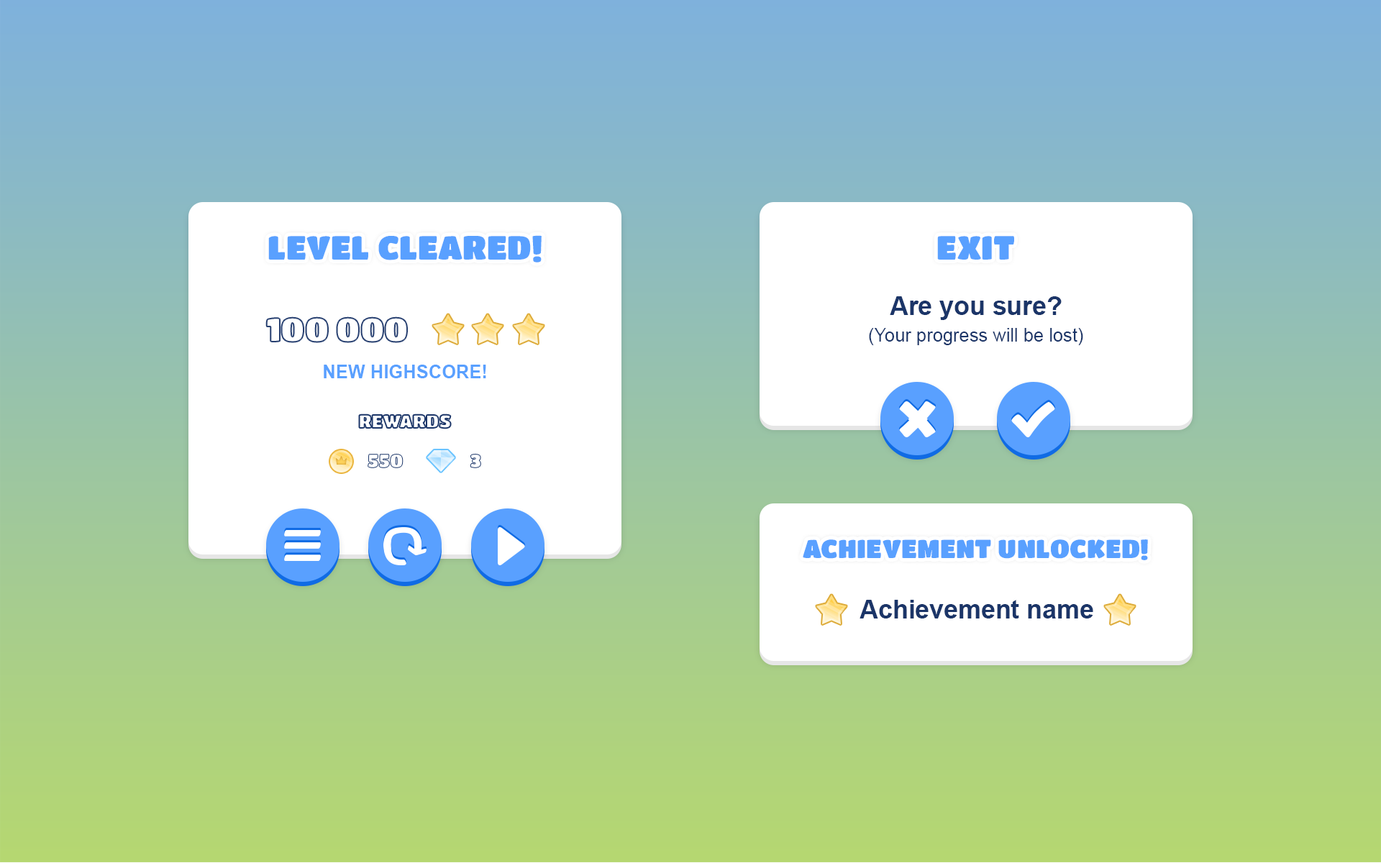
<style>
.page{position:relative;width:1381px;height:863px;background:#ffffff}
.page>*{position:absolute;margin:0}
.t1{font:33px "TitanOne";letter-spacing:0.01em;color:#59a0ff;text-transform:uppercase}
.t2{font:18.3px/26.4px "ArialMT";color:#1b3568}
.t3{font:25.7px/26.4px "Arial-BoldMT";color:#1b3568}
.t4{font:18.3px "Arial-BoldMT";color:#59a0ff;text-transform:uppercase}
.t5{font:18.3px "TitanOne";color:#ffffff;text-transform:uppercase}
.t6{font:25.7px "TitanOne";letter-spacing:0.01em;color:#59a0ff;text-transform:uppercase}
.t7{font:25.7px "Arial-BoldMT";color:#1b3568}
</style>
<div class="page">
<p class="t1" style="left:268px;top:235px;width:274px;height:28px">Level cleared!</p>
<p class="t1" style="left:937px;top:236px;width:77px;height:24px">exit</p>
<p class="t2" style="left:869px;top:296px;width:214px;height:49px;text-align:center"><span class="t3">Are you sure?<br></span>(Your progress will be lost)</p>
<p class="t4" style="left:324px;top:365px;width:162px;height:13px">new highscore!</p>
<p class="t5" style="left:359px;top:414px;width:92px;height:15px">rewards</p>
<p class="t6" style="left:803px;top:540px;width:345px;height:20px">achievement unlocked!</p>
<p class="t7" style="left:860px;top:600px;width:234px;height:19px">Achievement name</p>
</div>
